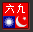
<style>
.page{position:relative;width:33px;height:32px;background:#f20000}
.page>*{position:absolute;margin:0}
.t1{font:10.4px "SimSun";color:#ffffff}
</style>
<div class="page">
<p class="t1" style="left:5px;top:4px;width:20px;height:9px">六九</p>
</div>
